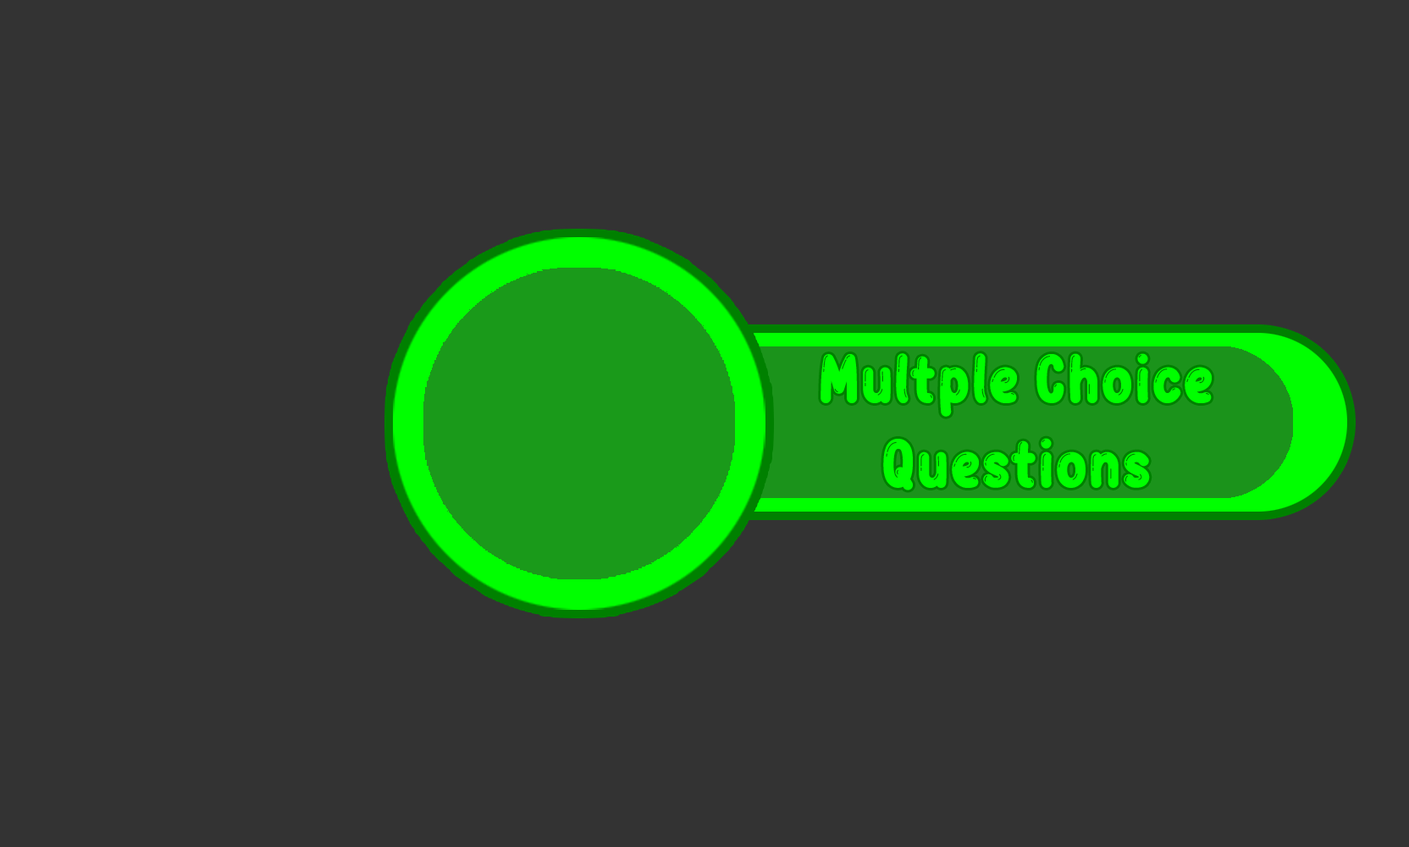
<style>
.page{position:relative;width:1409px;height:847px;background:#333333}
.page>*{position:absolute;margin:0}
.t1{font:70.5px "BubbleBobble";color:#00ff00}
</style>
<div class="page">
<p class="t1" style="left:820px;top:353px;width:391px;height:137px;text-align:center">Multple Choice<br>Questions</p>
</div>
